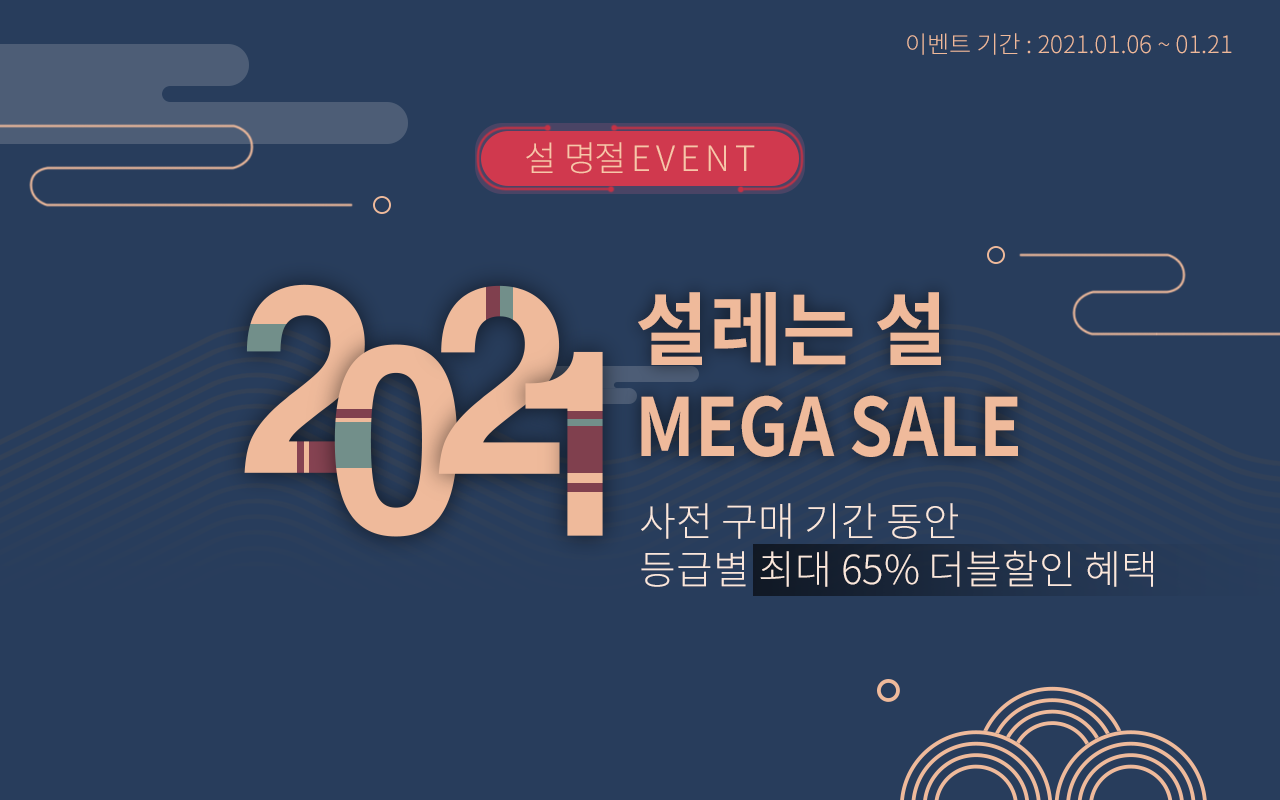
<style>
.page{position:relative;width:1280px;height:800px;background:#283d5c}
.page>*{position:absolute;margin:0}
.t1{font:24px "NotoSansKR-Light";color:#efba9b}
.t2{font:35px "NotoSansKR-Light";letter-spacing:0.14em;color:#f7c6a9}
.t3{font:35px "NotoSansKR-Light";color:#f7c6a9}
.t4{font:35px "NotoSansKR-Light";letter-spacing:-0.08em;color:#f7c6a9}
.t5{font:80px "NotoSansKR-Bold";color:#efba9b}
.t6{font:80px "NotoSansKR-Bold";color:#efba9b;scale:0.88 1}
.t7{font:40px/48px "NotoSansKR-Light";color:#fae7dc}
</style>
<div class="page">
<p class="t1" style="left:907px;top:33px;width:325px;height:22px">이벤트 기간 : 2021.01.06 ~ 01.21</p>
<p class="t2" style="left:526px;top:142px;width:229px;height:32px"><span class="t3">설 </span><span class="t4">명절 </span>EVENT</p>
<p class="t5" style="left:638px;top:292px;width:303px;height:74px">설레는 설</p>
<p class="t6" style="left:641px;top:395px;width:377px;height:62px">MEGA SALE</p>
<p class="t7" style="left:641px;top:503px;width:512px;height:84px">사전 구매 기간 동안<br>등급별 최대 65% 더블할인 혜택</p>
</div>
